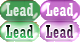
<style>
.page{position:relative;width:80px;height:42px}
.page>*{position:absolute;margin:0}
.t1{font:18px "Rockwell-Condensed";letter-spacing:0.025em;color:#ddece1}
.t2{font:18px "Rockwell-Condensed";letter-spacing:0.025em;color:#ffffff}
.t3{font:18px "Rockwell-Condensed";letter-spacing:0.025em}
</style>
<div class="page">
<p class="t1" style="left:6px;top:3px;width:28px;height:13px">Lead</p>
<p class="t2" style="left:46px;top:3px;width:28px;height:13px">Lead</p>
<p class="t3" style="left:6px;top:25px;width:28px;height:13px">Lead</p>
<p class="t3" style="left:46px;top:25px;width:28px;height:13px">Lead</p>
</div>
